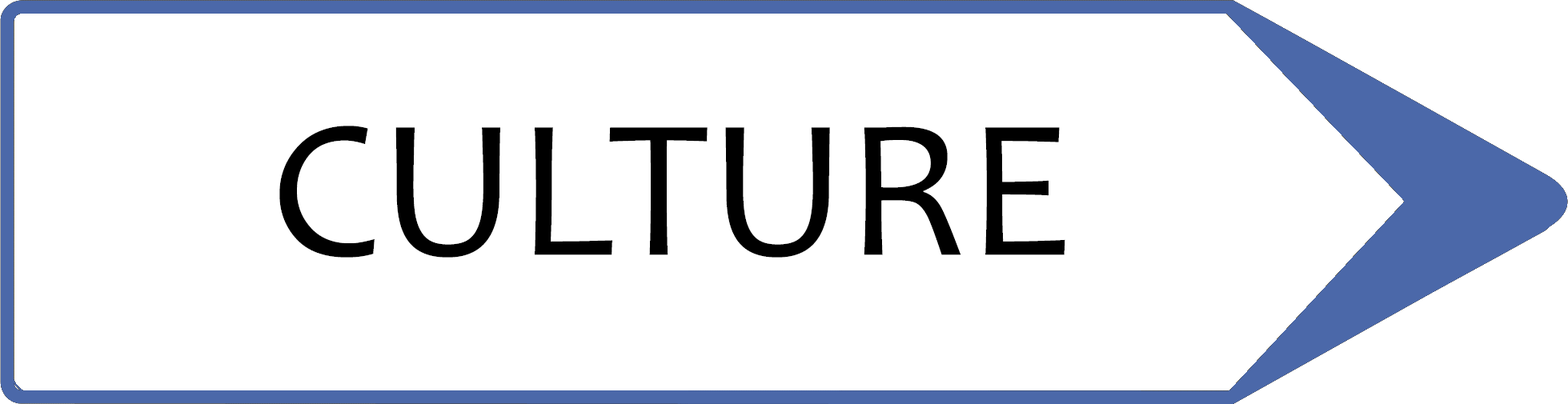
<style>
.page{position:relative;width:1568px;height:404px;background:#ffffff}
.page>*{position:absolute;margin:0}
.t1{font:200.1px "Candara";color:#000000}
</style>
<div class="page">
<p class="t1" style="left:279px;top:126px;width:786px;height:132px">CULTURE</p>
</div>
